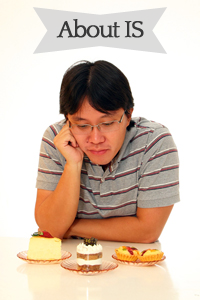
<style>
.page{position:relative;width:200px;height:300px;background:#ffffff}
.page>*{position:absolute;margin:0}
.t1{font:24.3px "Quattrocento";letter-spacing:-0.075em;color:#383838;font-weight:bold}
</style>
<div class="page">
<p class="t1" style="left:56px;top:19px;width:88px;height:19px">About IS</p>
</div>
